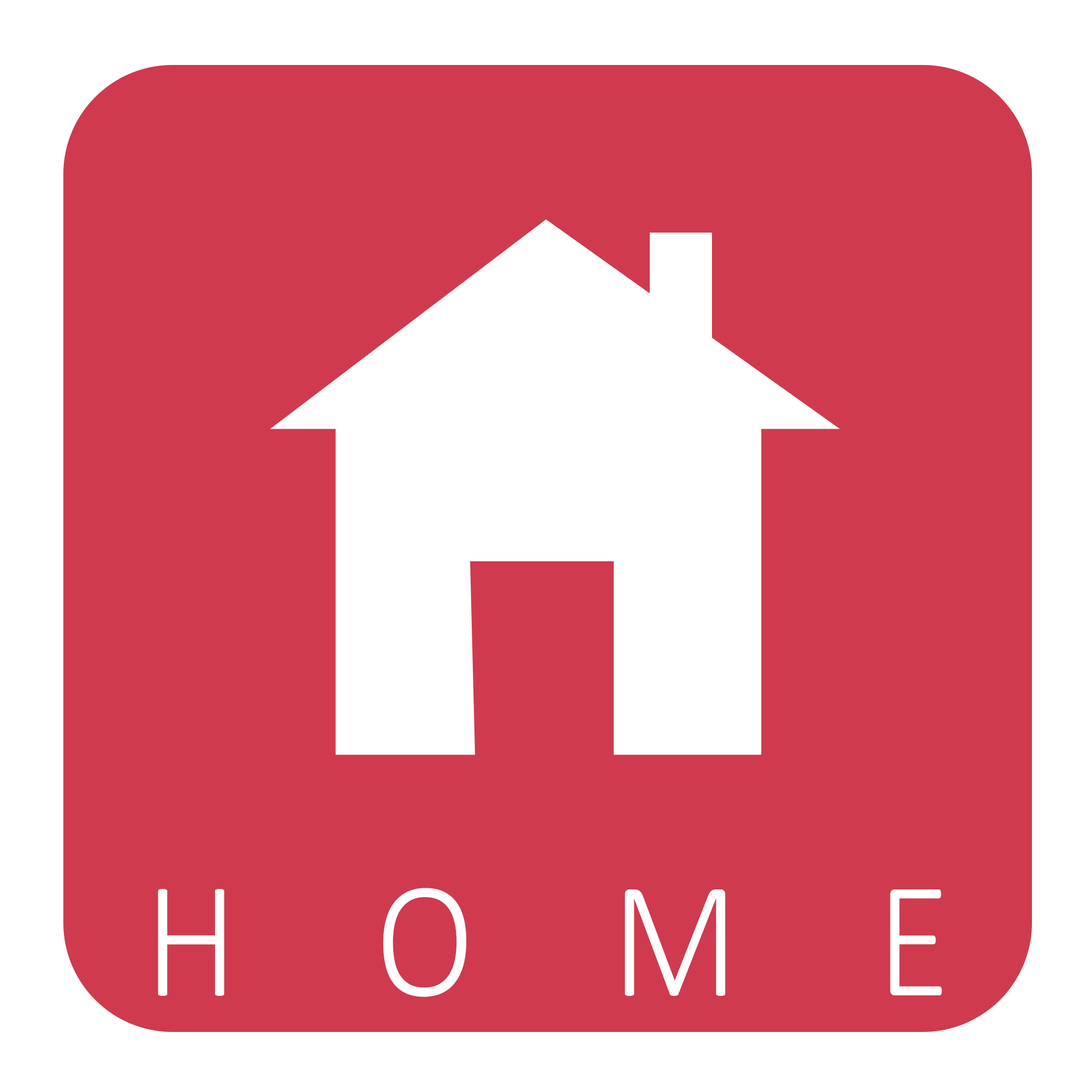
<style>
.page{position:relative;width:1092px;height:1092px;background:#cf3a4f}
.page>*{position:absolute;margin:0}
.t1{font:167.7px "Calibri-Light";letter-spacing:0.9em;color:#ffffff;scale:0.91 1}
</style>
<div class="page">
<p class="t1" style="left:158px;top:888px;width:784px;height:109px">HOME</p>
</div>
